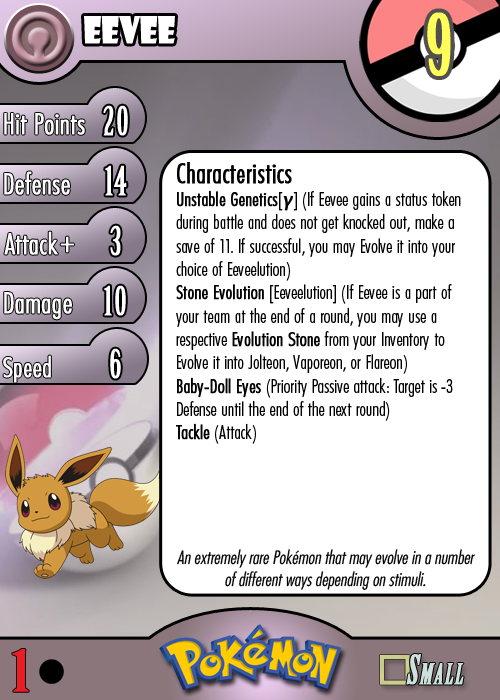
<style>
.page{position:relative;width:500px;height:700px;background:#ffffff}
.page>*{position:absolute;margin:0}
.t1{font:36.7px "ShowcardGothic-Reg";letter-spacing:-0.025em;color:#ffffff;scale:0.91 1}
.t2{font:83.3px "BirchStd";letter-spacing:0.025em;color:#fffd59;font-weight:bold}
.t3{font:27.8px "Futura-CondensedLight";color:#ffffff;font-weight:bold}
.t4{font:38.9px "BirchStd";letter-spacing:0.035em;color:#ffffff;font-weight:bold}
.t5{font:19.4px "FuturaCondensedBQ-Light";color:#010101}
.t6{font:27.8px "FuturaCondensedBQ-Light";color:#010101;font-weight:bold}
.t7{font:19.4px "FuturaCondensedBQ-Light";color:#010101;font-weight:bold}
.t8{font:19.4px "MyriadPro-Regular";letter-spacing:0.1em;color:#010101;font-weight:bold;font-style:italic}
.t9{font:30.6px "Futura-CondensedLight";color:#ffffff;font-weight:bold}
.t10{font:27.8px "FuturaCondensedBQ-Light";color:#ffffff;font-weight:bold}
.t11{font:18.1px "Futura-CondensedLight";color:#010101;font-style:italic}
.t12{font:55.6px "BirchStd";color:#ed1c24;font-weight:bold;scale:1.5 1}
</style>
<div class="page">
<p class="t1" style="left:84px;top:16px;width:91px;height:28px">eevee</p>
<p class="t2" style="left:427px;top:12px;width:24px;height:64px">9</p>
<p class="t3" style="left:4px;top:113px;width:81px;height:22px">Hit Points</p>
<p class="t4" style="left:103px;top:105px;width:25px;height:31px">20</p>
<p class="t3" style="left:4px;top:171px;width:66px;height:24px">Defense</p>
<p class="t4" style="left:105px;top:165px;width:22px;height:31px">14</p>
<p class="t5" style="left:176px;top:162px;width:285px;height:282px"><span class="t6">Characteristics<br></span><span class="t7">Unstable Genetics</span>[<span class="t8">γ</span>] (If Eevee gains a status token during battle and does not get knocked out, make a save of 11. If successful, you may Evolve it into your choice of Eeveelution)<br><span class="t7">Stone Evolution</span> [Eeveelution] (If Eevee is a part of your team at the end of a round, you may use a respective <span class="t7">Evolution Stone</span> from your Inventory to Evolve it into Jolteon, Vaporeon, or Flareon)<br><span class="t7">Baby-Doll Eyes</span> (Priority Passive attack: Target is -3 Defense until the end of the next round)<br><span class="t7">Tackle</span> (Attack)</p>
<p class="t3" style="left:4px;top:231px;width:54px;height:24px">Attack</p>
<p class="t4" style="left:110px;top:225px;width:11px;height:31px">3</p>
<p class="t9" style="left:60px;top:236px;width:14px;height:17px">+</p>
<p class="t3" style="left:4px;top:292px;width:68px;height:28px">Damage</p>
<p class="t4" style="left:104px;top:285px;width:22px;height:31px">10</p>
<p class="t4" style="left:110px;top:348px;width:11px;height:31px">6</p>
<p class="t10" style="left:3px;top:355px;width:48px;height:28px">Speed</p>
<p class="t11" style="left:177px;top:549px;width:298px;height:41px;text-align:center">An extremely rare Pokémon that may evolve in a number of different ways depending on stimuli.</p>
<p class="t12" style="left:12px;top:649px;width:17px;height:43px">1</p>
</div>
